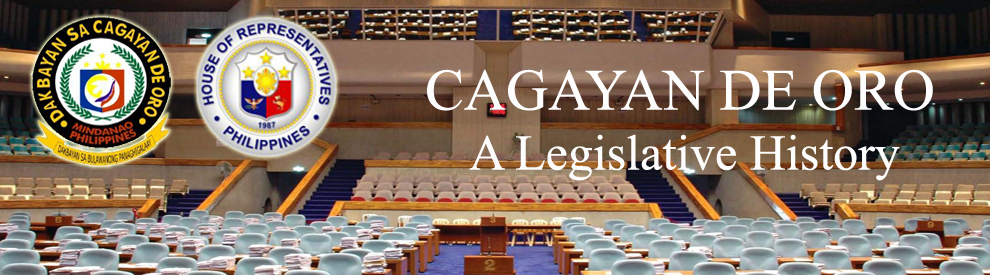
<style>
.page{position:relative;width:990px;height:275px}
.page>*{position:absolute;margin:0}
.t1{font:50px "TimesNewRomanPSMT";color:#fdfcfc}
.t2{font:58.3px "TimesNewRomanPSMT";color:#fdfdfd}
</style>
<div class="page">
<p class="t1" style="left:427px;top:69px;width:506px;height:112px;text-align:center"><span class="t2">CAGAYAN DE ORO<br></span>A Legislative History</p>
</div>
